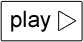
<style>
.page{position:relative;width:83px;height:42px;background:#ffffff}
.page>*{position:absolute;margin:0}
.t1{font:22.8px "ArialMT";color:#0d0c0c}
</style>
<div class="page">
<p class="t1" style="left:11px;top:10px;width:40px;height:22px">play</p>
</div>
